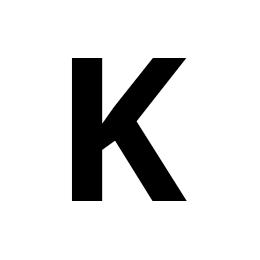
<style>
.page{position:relative;width:260px;height:260px;background:#ffffff}
.page>*{position:absolute;margin:0}
.t1{font:200px "NotoSans-Bold";color:#000000}
</style>
<div class="page">
<p class="t1" style="left:71px;top:58px;width:116px;height:143px">K</p>
</div>
